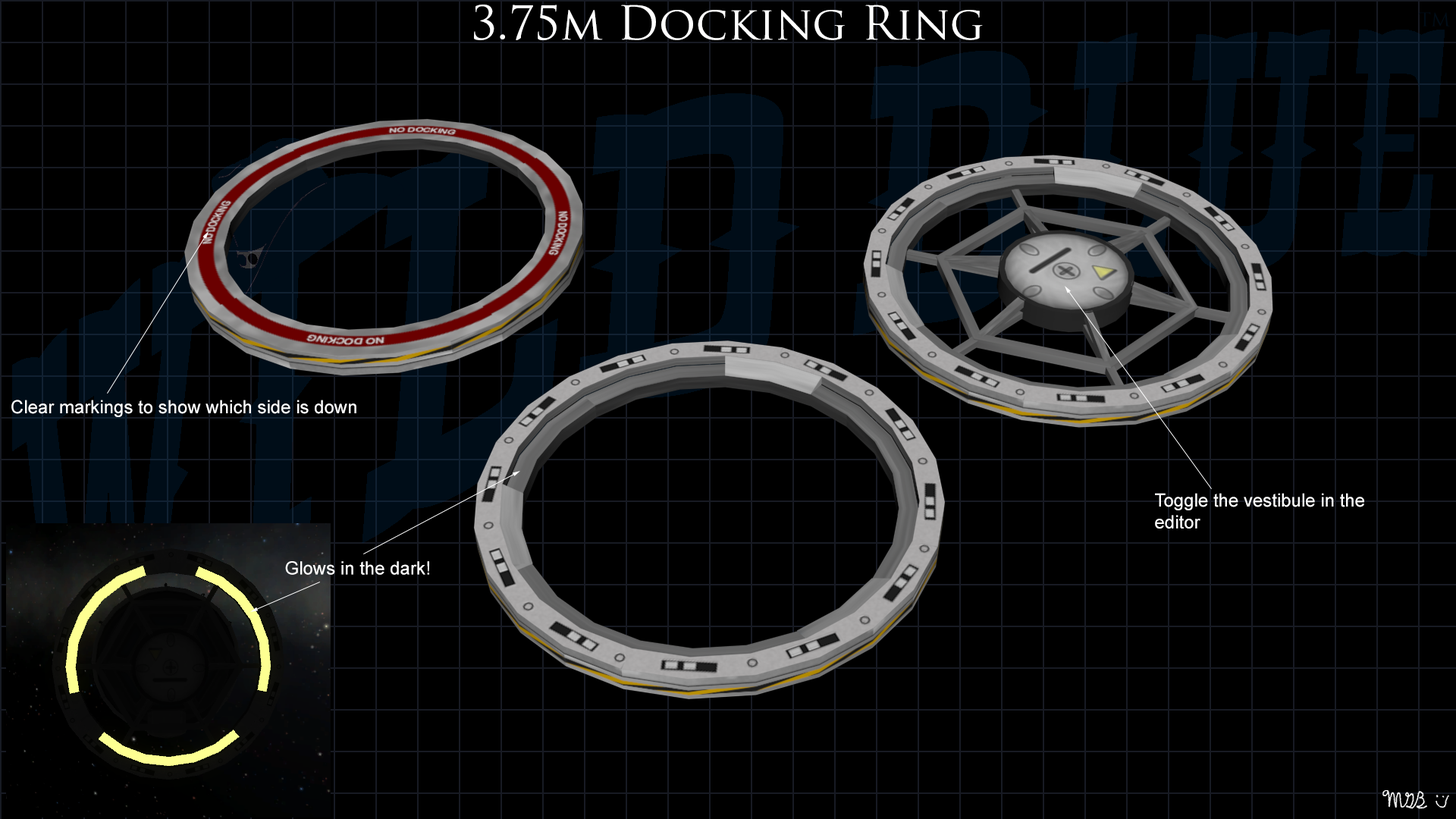
<style>
.page{position:relative;width:1456px;height:819px;background:#000000}
.page>*{position:absolute;margin:0}
.t1{font:45.5px "TrajanPro-Regular";color:#ffffff}
.t2{font:18.2px "ArialMT";color:#ffffff}
</style>
<div class="page">
<p class="t1" style="left:474px;top:5px;width:509px;height:35px">3.75m Docking Ring</p>
<p class="t2" style="left:11px;top:400px;width:345px;height:17px">Clear markings to show which side is down</p>
<p class="t2" style="left:1155px;top:493px;width:209px;height:36px">Toggle the vestibule in the<br>editor</p>
<p class="t2" style="left:285px;top:561px;width:144px;height:14px">Glows in the dark!</p>
</div>
